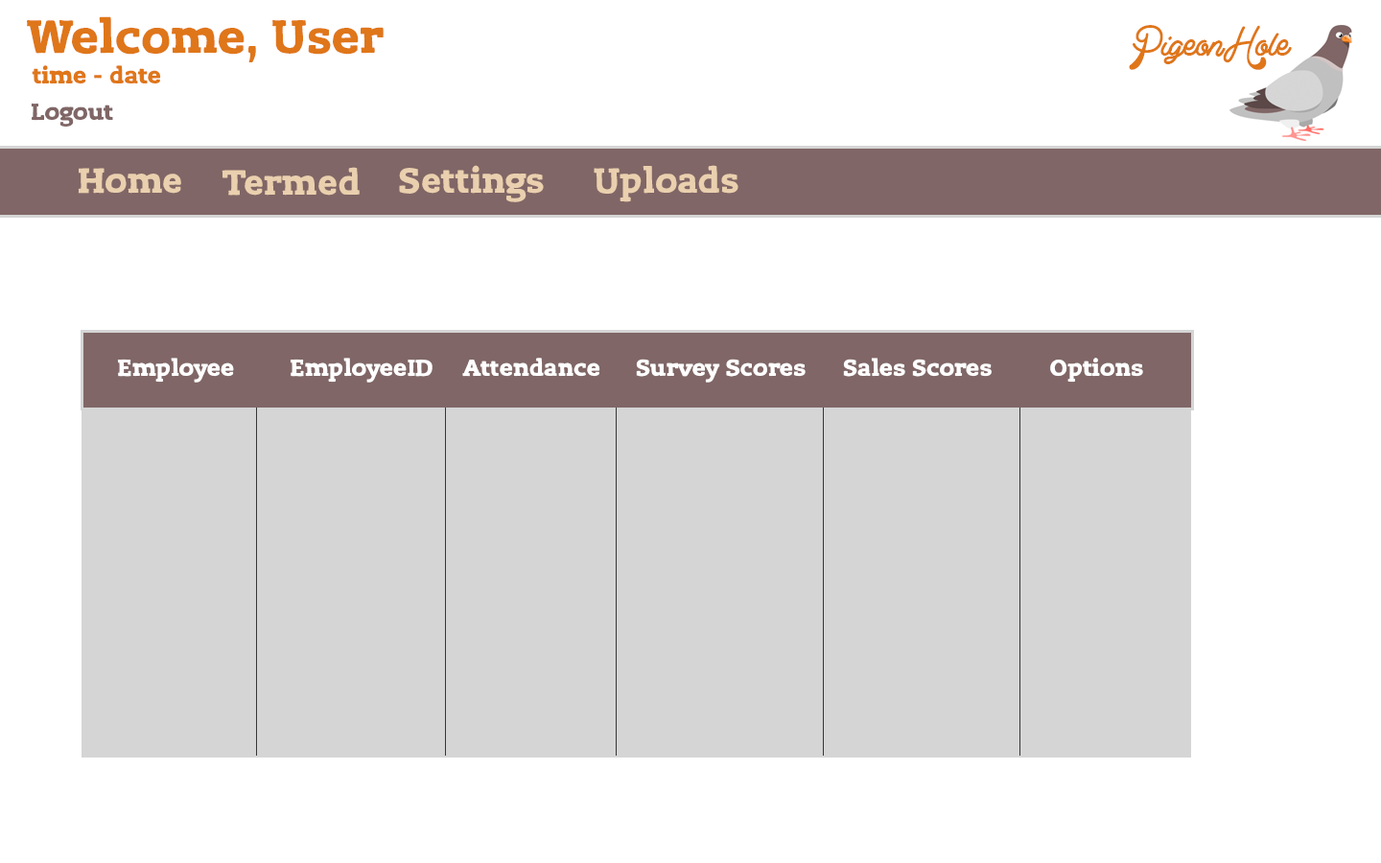
<style>
.page{position:relative;width:1381px;height:863px;background:#ffffff}
.page>*{position:absolute;margin:0}
.t1{font:46px "LevSerif-Handcut";color:#df7619}
.t2{font:46px "ClearLine-PERSONALUSEONLY";color:#df7619}
.t3{font:23px "LevSerif-Handcut";color:#df7619}
.t4{font:23px "LevSerif-Handcut";color:#806666}
.t5{font:34.5px "LevSerif-Handcut";color:#ead0ae}
.t6{font:23px "LevSerif-Handcut";color:#ffffff}
</style>
<div class="page">
<p class="t1" style="left:27px;top:16px;width:357px;height:46px">Welcome, User</p>
<p class="t2" style="left:1129px;top:25px;width:163px;height:45px">PigeonHole</p>
<p class="t3" style="left:32px;top:65px;width:129px;height:19px">time - date</p>
<p class="t4" style="left:31px;top:103px;width:82px;height:24px">Logout</p>
<p class="t5" style="left:78px;top:168px;width:103px;height:26px">Home</p>
<p class="t5" style="left:222px;top:167px;width:138px;height:29px">Termed</p>
<p class="t5" style="left:399px;top:165px;width:145px;height:37px">Settings</p>
<p class="t5" style="left:594px;top:165px;width:145px;height:37px">Uploads</p>
<p class="t6" style="left:117px;top:358px;width:1026px;height:25px">Employee  EmployeeID Attendance  Survey Scores  Sales Scores  Options</p>
</div>
